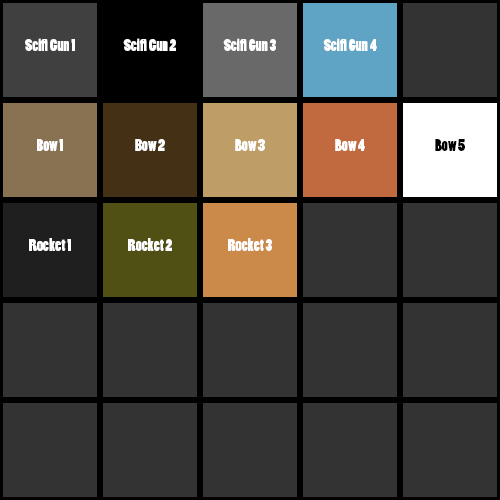
<style>
.page{position:relative;width:500px;height:500px;background:#333333}
.page>*{position:absolute;margin:0}
.t1{font:16px "PoplarStd";color:#ffffff}
.t2{font:16px "PoplarStd";color:#000000}
.t3{font:16.2px "PoplarStd";color:#ffffff}
</style>
<div class="page">
<p class="t1" style="left:25px;top:38px;width:50px;height:13px">Scifi Gun 1</p>
<p class="t1" style="left:123px;top:38px;width:53px;height:13px">Scifi Gun 2</p>
<p class="t1" style="left:223px;top:38px;width:53px;height:13px">Scifi Gun 3</p>
<p class="t1" style="left:323px;top:38px;width:54px;height:13px">Scifi Gun 4</p>
<p class="t1" style="left:37px;top:139px;width:26px;height:12px">Bow 1</p>
<p class="t1" style="left:135px;top:139px;width:30px;height:12px">Bow 2</p>
<p class="t1" style="left:235px;top:139px;width:30px;height:12px">Bow 3</p>
<p class="t1" style="left:335px;top:139px;width:30px;height:12px">Bow 4</p>
<p class="t2" style="left:435px;top:139px;width:30px;height:12px"><span class="t1"><br><br></span>Bow 5</p>
<p class="t3" style="left:29px;top:238px;width:42px;height:13px">Rocket 1</p>
<p class="t3" style="left:128px;top:238px;width:44px;height:13px">Rocket 2</p>
<p class="t3" style="left:228px;top:238px;width:44px;height:13px">Rocket 3</p>
</div>
